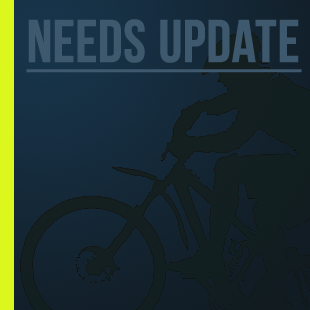
<style>
.page{position:relative;width:310px;height:310px}
.page>*{position:absolute;margin:0}
.t1{font:60px "BebasNeue";color:#3e586d;font-weight:bold;text-decoration:underline}
</style>
<div class="page">
<p class="t1" style="left:26px;top:19px;width:276px;height:54px">Needs Update</p>
</div>
